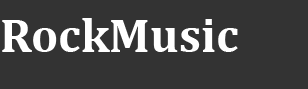
<style>
.page{position:relative;width:308px;height:89px;background:#333333}
.page>*{position:absolute;margin:0}
.t1{font:48px "Cambria-Bold";color:#ffffff}
</style>
<div class="page">
<p class="t1" style="left:2px;top:18px;width:236px;height:34px">RockMusic</p>
</div>
